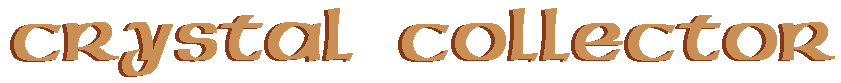
<style>
.page{position:relative;width:841px;height:83px;background:#ffffff}
.page>*{position:absolute;margin:0}
.t1{font:75px "AmericanUncD";letter-spacing:0.02em;font-weight:bold}
.t2{font:75px "AmericanUncD";letter-spacing:0.02em;color:#ca8f54;font-weight:bold}
</style>
<div class="page">
<p class="t1" style="left:10px;top:9px;width:821px;height:68px">Crystal  Collector</p>
<p class="t2" style="left:14px;top:8px;width:821px;height:68px">Crystal  collector</p>
</div>
